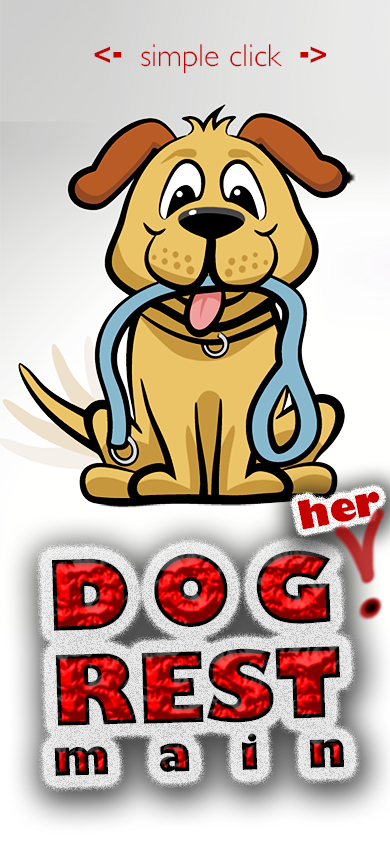
<style>
.page{position:relative;width:390px;height:844px}
.page>*{position:absolute;margin:0}
.t1{font:31.7px "GillSans-Light";color:#c50000}
.t2{font:31.7px "GillSans-SemiBold";color:#c50000}
.t3{font:49.6px "GillSans-SemiBold";color:#c50000;scale:0.65 1}
.t4{font:38.6px "GillSans-UltraBold";color:#c50000}
.t5{font:95px/96px "GillSans-UltraBold"}
.t6{font:95px/96px "GillSans-UltraBold";letter-spacing:0.2em}
.t7{font:47.5px/49.3px "GillSans-UltraBold";letter-spacing:1em}
</style>
<div class="page">
<p class="t1" style="left:94px;top:44px;width:232px;height:30px"><span class="t2">&lt;</span><span class="t3">-  </span>simple click  <span class="t3">-</span><span class="t2">&gt;</span></p>
<p class="t4" style="left:297px;top:491px;width:83px;height:39px;rotate:-11deg">her</p>
<p class="t5" style="left:52px;top:550px;width:292px;height:226px;text-align:center;rotate:-2deg"><span class="t6">  DOG  <br></span>REST<br><span class="t7">main</span></p>
</div>
